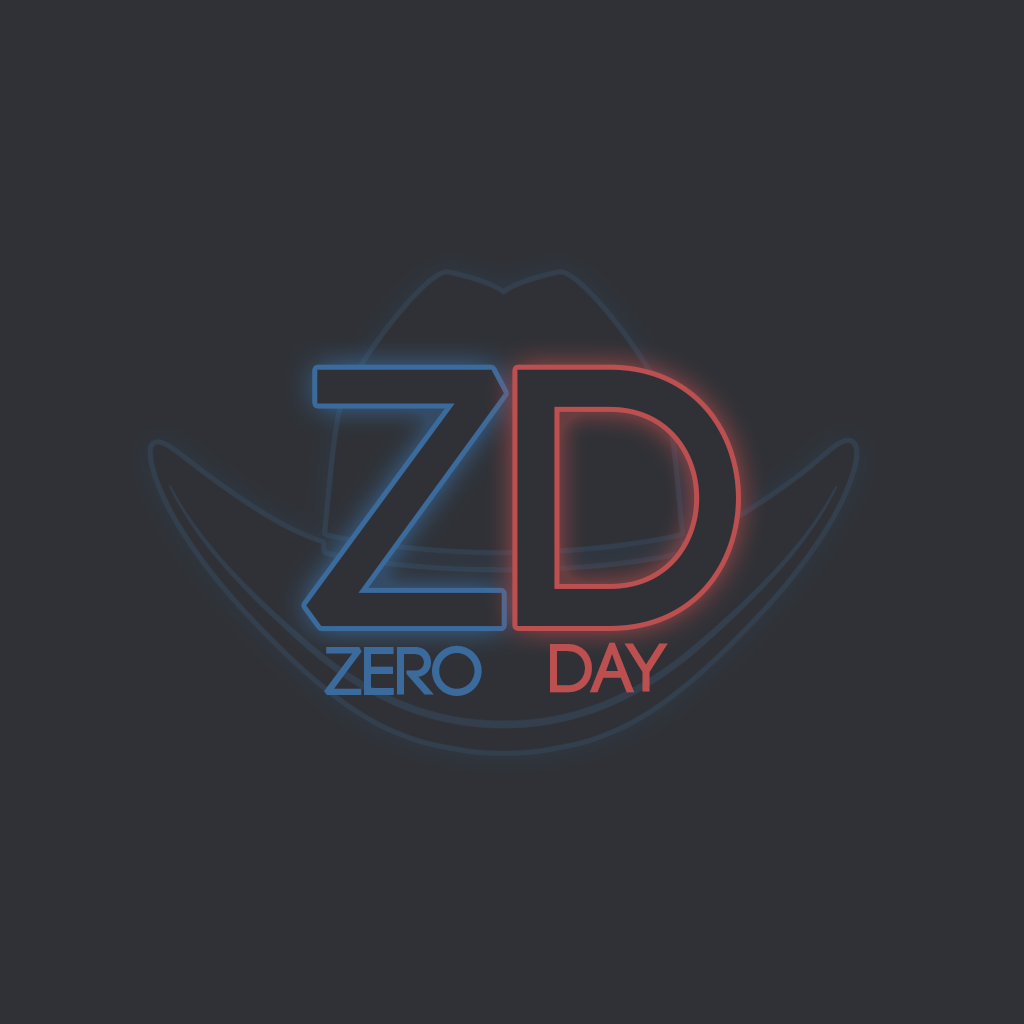
<style>
.page{position:relative;width:1024px;height:1024px;background:#2f3136}
.page>*{position:absolute;margin:0}
.t1{font:367.6px "Code-Bold";color:#222222}
.t2{font:69.7px "Code-Bold";color:#3b6b9c}
.t3{font:69.7px "Code-Bold";color:#bc4f4f}
</style>
<div class="page">
<p class="t1" style="left:306px;top:369px;width:198px;height:258px">Z</p>
<p class="t1" style="left:517px;top:369px;width:219px;height:257px">D</p>
<p class="t2" style="left:324px;top:645px;width:158px;height:51px">Zero</p>
<p class="t3" style="left:550px;top:642px;width:118px;height:51px">Day</p>
</div>
